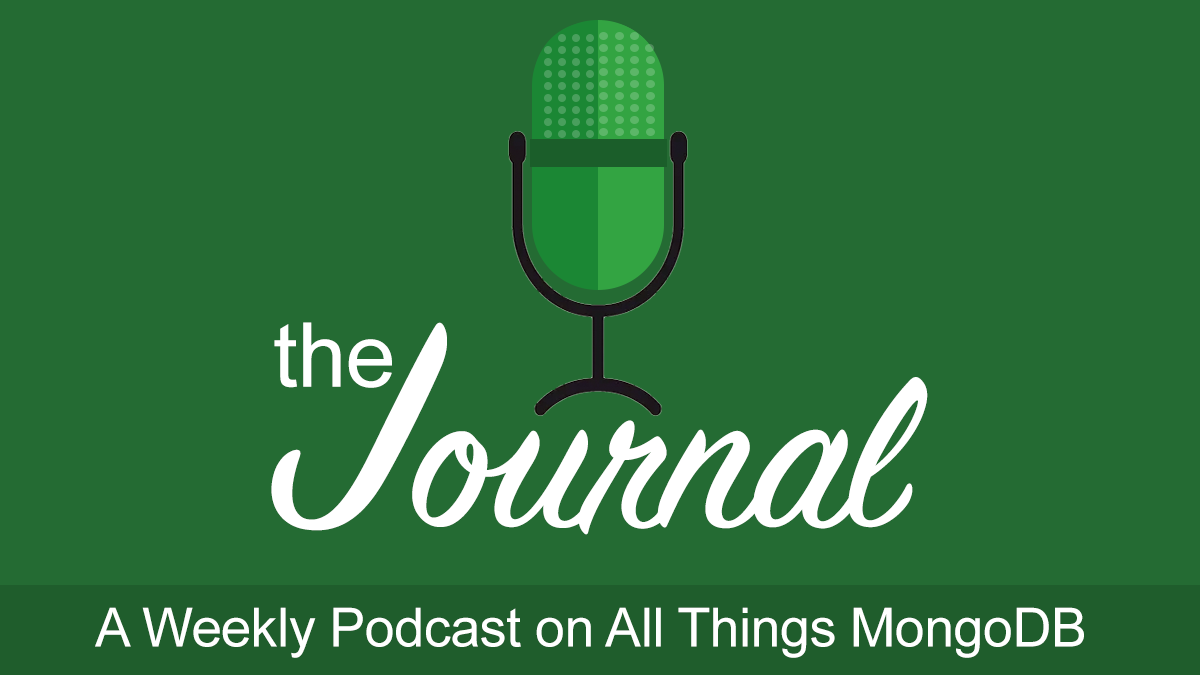
<style>
.page{position:relative;width:1200px;height:675px;background:#246b33}
.page>*{position:absolute;margin:0}
.t1{font:237.2px "SignPainter-HouseScript";letter-spacing:-0.01em;color:#ffffff}
.t2{font:322.4px "SignPainter-HouseScript";letter-spacing:-0.01em;color:#ffffff}
.t3{font:89.6px "ArialMT";letter-spacing:-0.01em;color:#ffffff}
.t4{font:53.9px "ArialMT";letter-spacing:-0.01em;color:#ffffff}
</style>
<div class="page">
<p class="t1" style="left:271px;top:322px;width:657px;height:213px"><span class="t2">J</span>ournal</p>
<p class="t3" style="left:274px;top:322px;width:118px;height:66px">the</p>
<p class="t4" style="left:95px;top:607px;width:989px;height:51px">A Weekly Podcast on All Things MongoDB</p>
</div>
